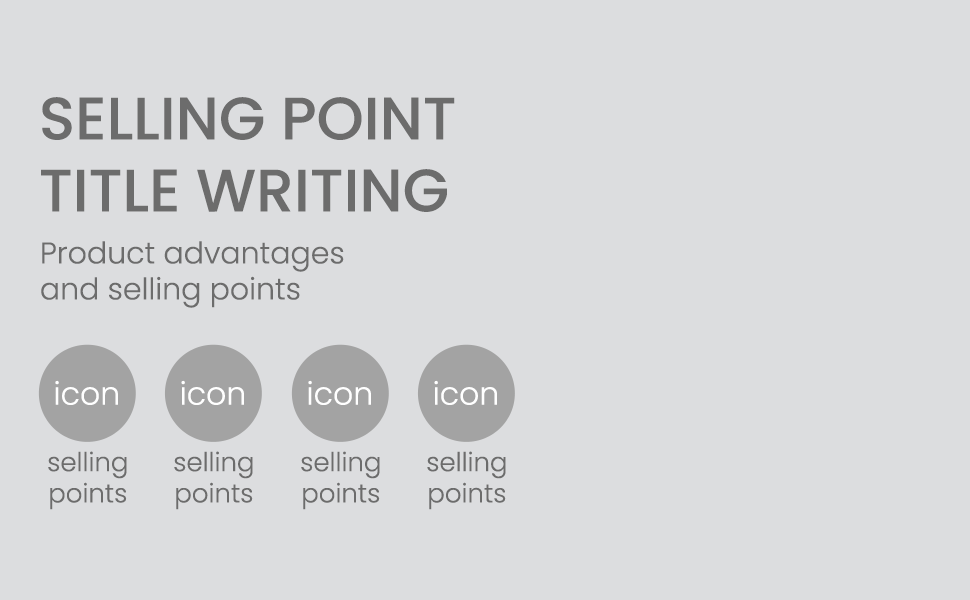
<style>
.page{position:relative;width:970px;height:600px;background:#dcdddf}
.page>*{position:absolute;margin:0}
.t1{font:60px "Poppins-Medium";color:#6c6c6c;text-transform:uppercase}
.t2{font:30px "Poppins-Light";color:#6c6c6c}
.t3{font:31.5px "Poppins-Light";color:#ffffff}
.t4{font:26px "Poppins-Light";color:#6c6c6c}
</style>
<div class="page">
<p class="t1" style="left:41px;top:97px;width:414px;height:115px">Selling point<br>title writing</p>
<p class="t2" style="left:41px;top:241px;width:303px;height:67px">Product advantages<br>and selling points</p>
<p class="t3" style="left:55px;top:380px;width:63px;height:25px">icon</p>
<p class="t3" style="left:181px;top:380px;width:63px;height:25px">icon</p>
<p class="t3" style="left:308px;top:380px;width:63px;height:25px">icon</p>
<p class="t3" style="left:434px;top:380px;width:63px;height:25px">icon</p>
<p class="t4" style="left:48px;top:451px;width:79px;height:59px;text-align:center">selling<br>points</p>
<p class="t4" style="left:174px;top:451px;width:79px;height:59px;text-align:center">selling<br>points</p>
<p class="t4" style="left:301px;top:451px;width:79px;height:59px;text-align:center">selling<br>points</p>
<p class="t4" style="left:427px;top:451px;width:79px;height:59px;text-align:center">selling<br>points</p>
</div>
